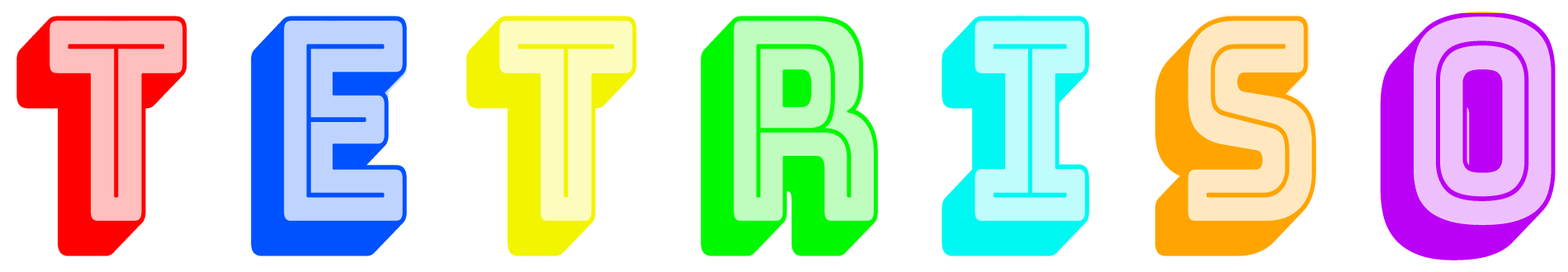
<style>
.page{position:relative;width:1568px;height:272px;background:#ffffff}
.page>*{position:absolute;margin:0}
.t1{font:280.6px "BungeeShade-Regular";letter-spacing:0.22em;font-weight:bold;scale:0.8 1}
</style>
<div class="page">
<p class="t1" style="left:17px;top:12px;width:1539px;height:249px">TETRISO</p>
</div>
